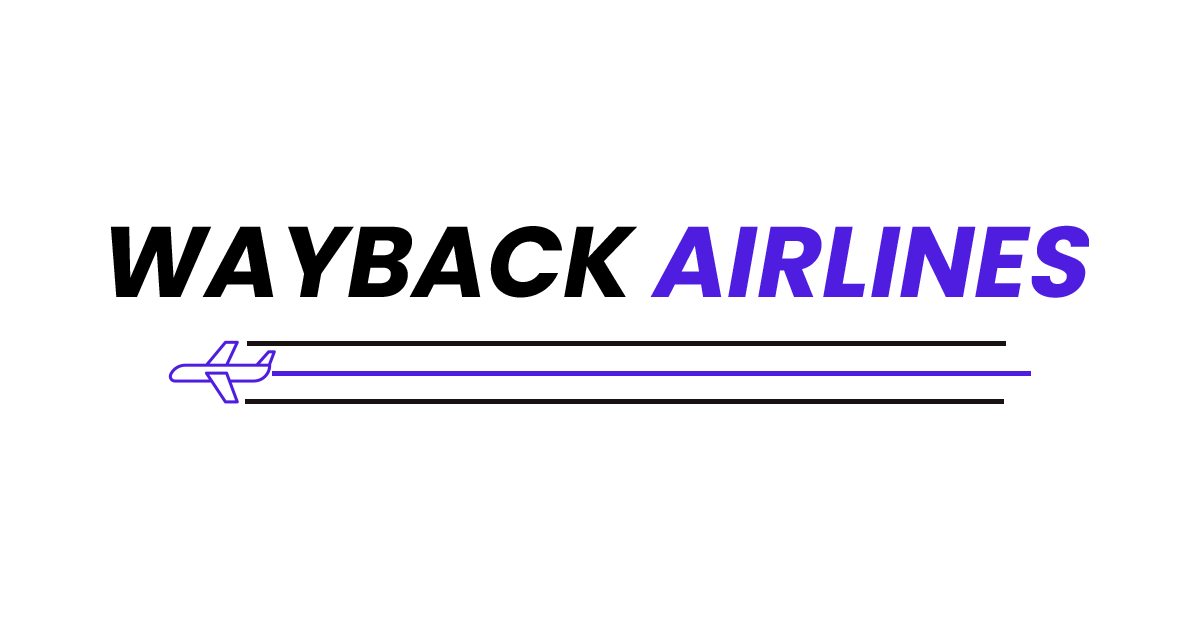
<style>
.page{position:relative;width:1200px;height:630px;background:#ffffff}
.page>*{position:absolute;margin:0}
.t1{font:100px "Poppins-Bold";color:#4f1de0;font-style:italic}
.t2{font:100px "Poppins-Bold";color:#000000;font-style:italic}
</style>
<div class="page">
<p class="t1" style="left:111px;top:225px;width:978px;height:73px"><span class="t2">WAYBACK </span>AIRLINES</p>
</div>
